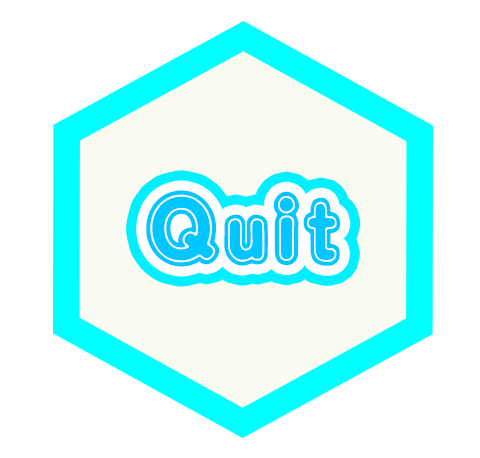
<style>
.page{position:relative;width:480px;height:458px;background:#ffffff}
.page>*{position:absolute;margin:0}
.t1{font:100px "DokiDokiFantasia";color:#01c6ff}
</style>
<div class="page">
<p class="t1" style="left:146px;top:190px;width:195px;height:77px">Quit</p>
</div>
